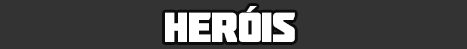
<style>
.page{position:relative;width:467px;height:49px;background:#333333}
.page>*{position:absolute;margin:0}
.t1{font:35px "DeadpoolMovie";color:#ffffff}
</style>
<div class="page">
<p class="t1" style="left:165px;top:6px;width:130px;height:36px">heróis</p>
</div>
